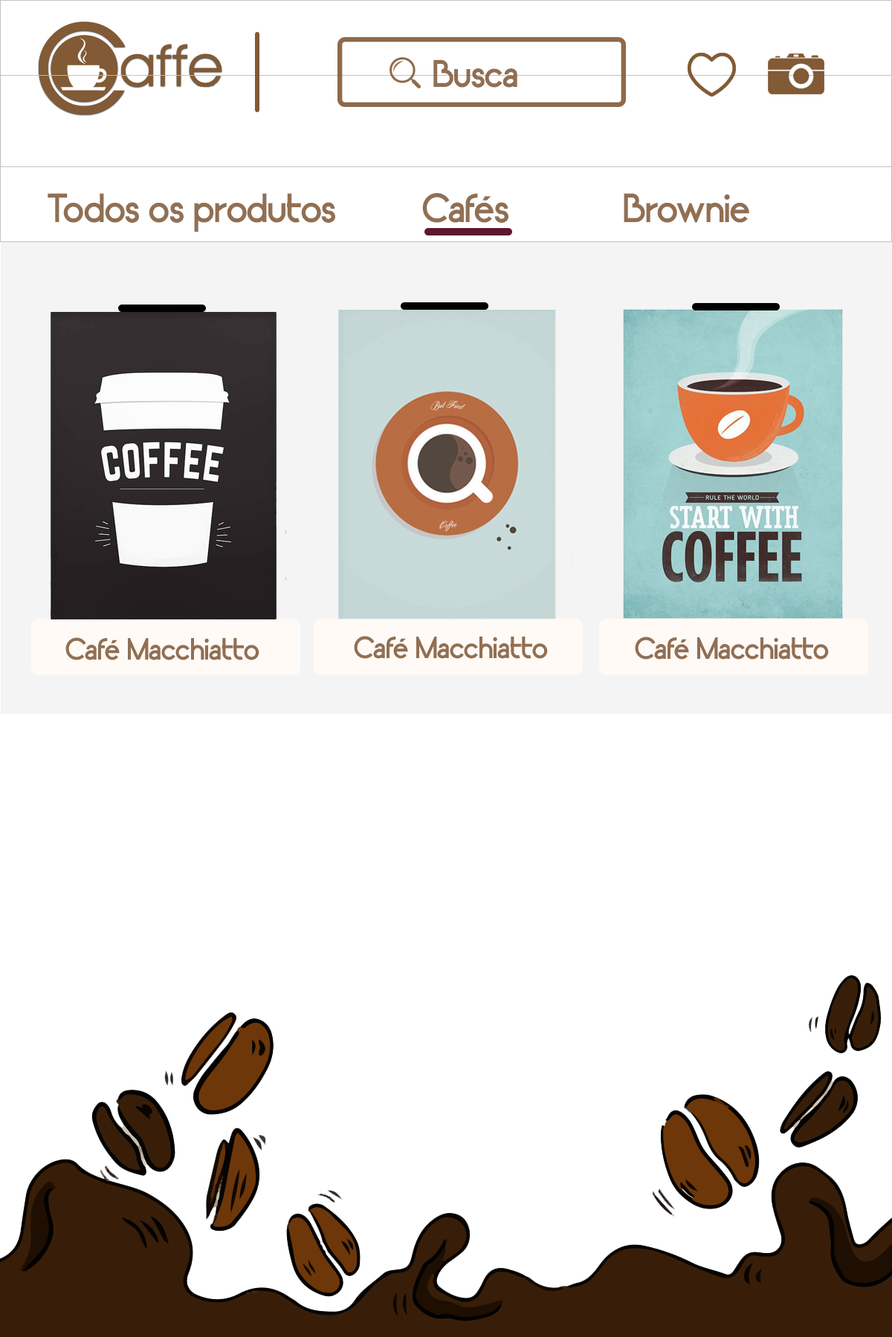
<style>
.page{position:relative;width:892px;height:1337px;background:#ffffff}
.page>*{position:absolute;margin:0}
.t1{font:35.7px "Lugos-Regular";color:#916f53}
.t2{font:37.9px "Lugos-Regular";color:#916f53}
.t3{font:28.6px "Lugos-Regular";color:#916f53}
</style>
<div class="page">
<p class="t1" style="left:433px;top:59px;width:84px;height:29px">Busca</p>
<p class="t2" style="left:48px;top:193px;width:287px;height:39px">Todos os produtos</p>
<p class="t2" style="left:422px;top:193px;width:86px;height:30px">Cafés</p>
<p class="t2" style="left:623px;top:193px;width:126px;height:30px">Brownie</p>
<p class="t3" style="left:65px;top:637px;width:194px;height:24px">Café Macchiatto</p>
<p class="t3" style="left:354px;top:636px;width:194px;height:23px">Café Macchiatto</p>
<p class="t3" style="left:635px;top:637px;width:193px;height:23px">Café Macchiatto</p>
</div>
